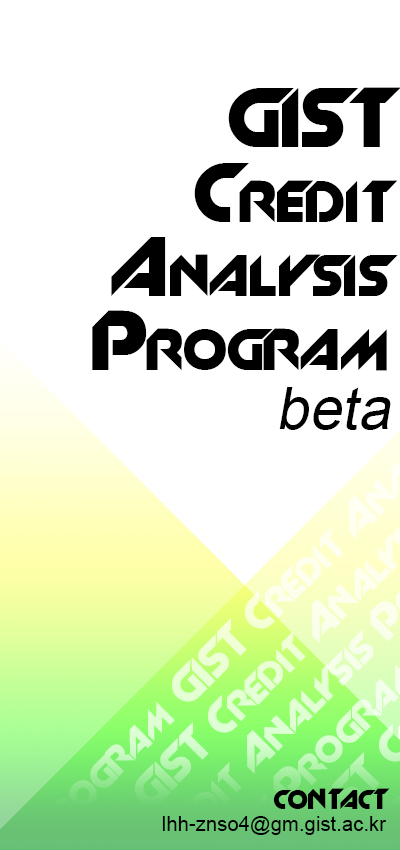
<style>
.page{position:relative;width:400px;height:850px;background:#ffffff}
.page>*{position:absolute;margin:0}
.t1{font:77.3px/74.1px "Slant";color:#000000}
.t2{font:89.8px/74.1px "Slant";color:#000000}
.t3{font:77.3px/83.3px "Slant";color:#000000}
.t4{font:58.3px/83.3px "ArialMT";color:#000000;font-style:italic}
.t5{font:58.3px/74.1px "ArialMT";color:#000000;font-style:italic}
.t6{font:20.8px/29.2px "ArialMT";color:#000000}
.t7{font:29.2px/20.8px "Slant";color:#000000}
.t8{font:29.2px/29.2px "Slant";color:#000000}
.t9{font:20.8px/20.8px "ArialMT";color:#000000}
</style>
<div class="page">
<p class="t1" style="left:92px;top:87px;width:309px;height:343px;text-align:right"><span class="t2">GIST<br>C</span>redit<br><span class="t2">A</span>nalysis<br><span class="t2">P</span><span class="t3">rogram<br></span><span class="t4">be</span><span class="t5">ta</span></p>
<p class="t6" style="left:162px;top:788px;width:228px;height:47px;text-align:right"><span class="t7">CON</span><span class="t8">TA</span><span class="t7">CT<br></span>lhh-znso4@gm.gist.ac.<span class="t9">kr</span></p>
</div>
